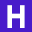
<style>
.page{position:relative;width:32px;height:32px;background:#481bca}
.page>*{position:absolute;margin:0}
.t1{font:33px "Ubuntu-Bold";letter-spacing:0.025em;color:#ffffff;scale:0.91 1}
</style>
<div class="page">
<p class="t1" style="left:7px;top:5px;width:18px;height:23px">Н</p>
</div>
